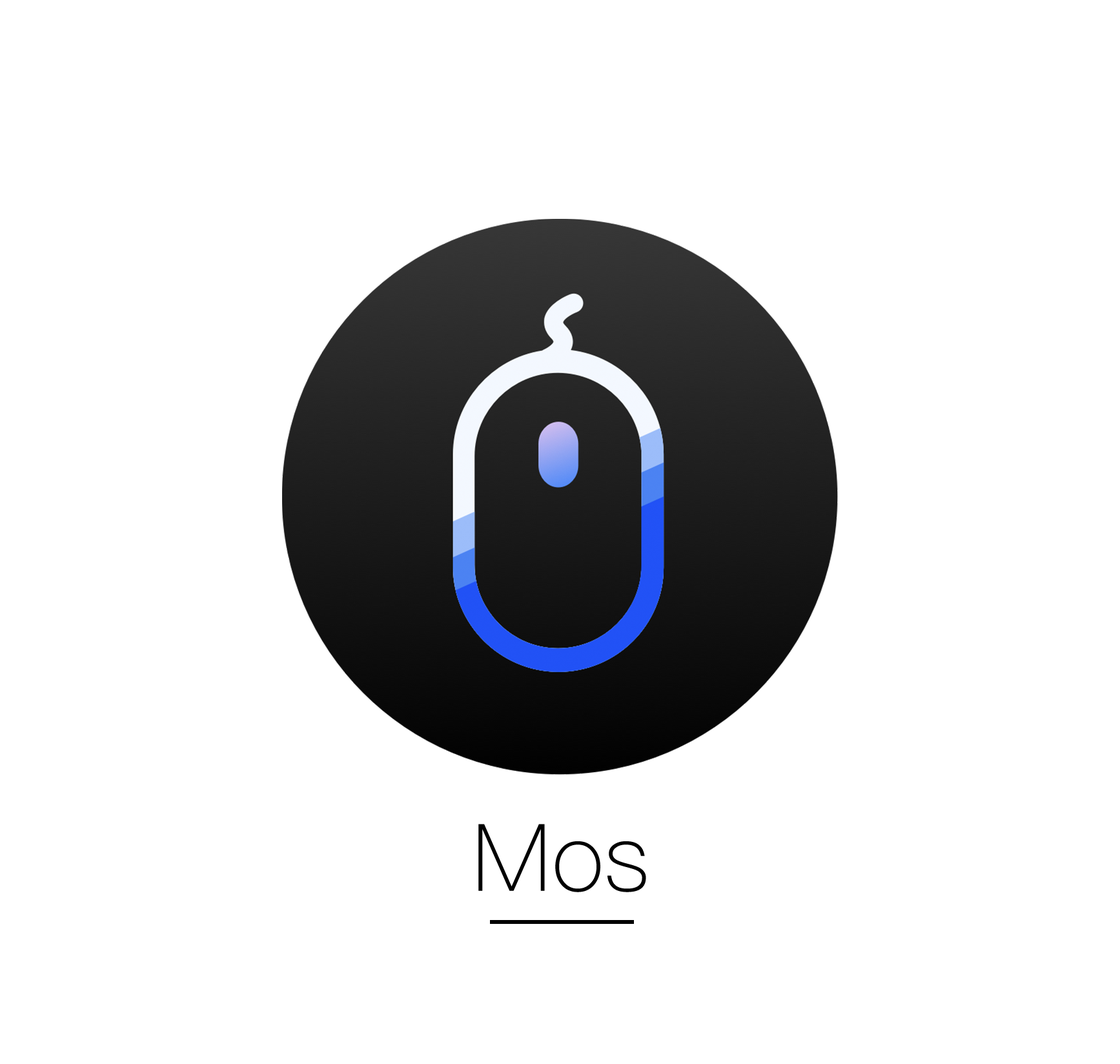
<style>
.page{position:relative;width:1120px;height:1064px;background:#ffffff}
.page>*{position:absolute;margin:0}
.t1{font:93px "PingFangSC-Thin";color:#000000}
</style>
<div class="page">
<p class="t1" style="left:479px;top:824px;width:167px;height:68px">Mos</p>
</div>
